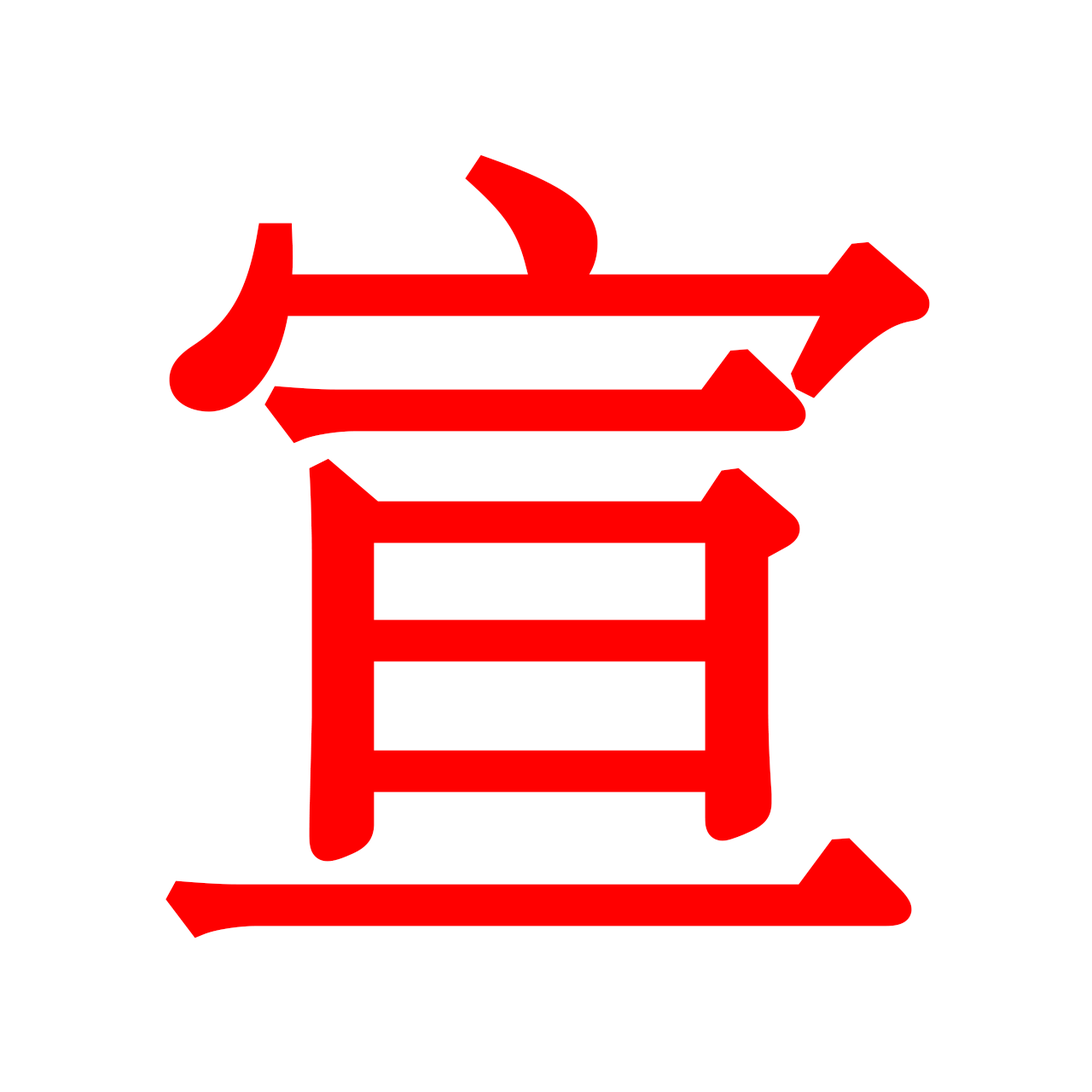
<style>
.page{position:relative;width:1092px;height:1092px;background:#ffffff}
.page>*{position:absolute;margin:0}
.t1{font:853.1px "AdobeSongStd-Light";color:#ff0000;font-weight:bold}
</style>
<div class="page">
<p class="t1" style="left:166px;top:154px;width:764px;height:784px">宣</p>
</div>
